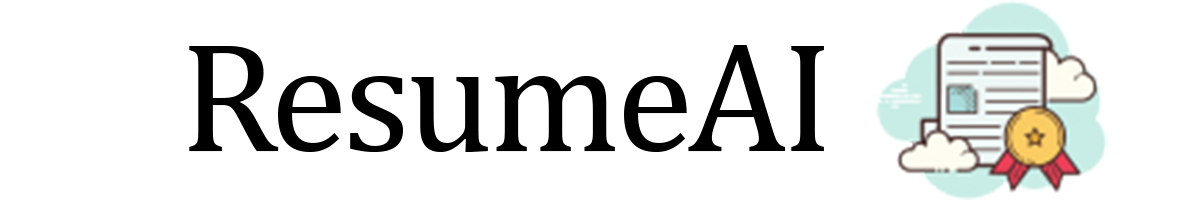
<style>
.page{position:relative;width:1200px;height:200px;background:#ffffff}
.page>*{position:absolute;margin:0}
.t1{font:158.3px "CambriaMath";letter-spacing:-0.03em;color:#000000}
</style>
<div class="page">
<p class="t1" style="left:189px;top:45px;width:635px;height:107px">ResumeAI</p>
</div>
